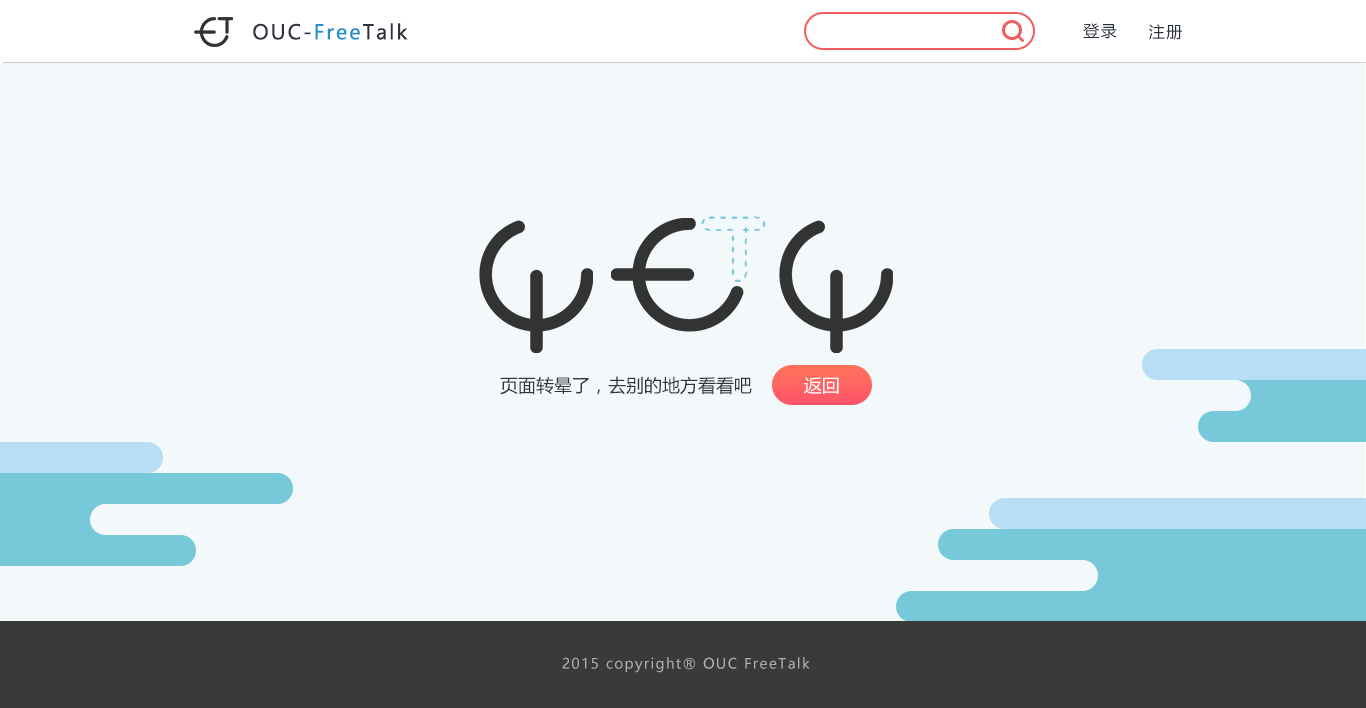
<style>
.page{position:relative;width:1366px;height:708px;background:#f3f8fb}
.page>*{position:absolute;margin:0}
.t1{font:20px "MicrosoftYaHei";letter-spacing:0.1em;color:#2b313f}
.t2{font:20px "MicrosoftYaHei";letter-spacing:0.1em;color:#2390cf}
.t3{font:16px "MicrosoftYaHei";letter-spacing:0.1em;color:#2b313f}
.t4{font:18px "MicrosoftYaHei";color:#333333}
.t5{font:18px "MicrosoftYaHei";color:#ffffff}
.t6{font:14px "MicrosoftYaHei";letter-spacing:0.1em;color:#afafb0}
</style>
<div class="page">
<p class="t1" style="left:253px;top:23px;width:155px;height:17px">OUC-<span class="t2">Free</span>Talk</p>
<p class="t3" style="left:1083px;top:23px;width:34px;height:16px">登录</p>
<p class="t3" style="left:1149px;top:24px;width:33px;height:16px">注册</p>
<p class="t4" style="left:500px;top:376px;width:252px;height:19px">页面转晕了，去别的地方看看吧</p>
<p class="t5" style="left:804px;top:377px;width:35px;height:17px">返回</p>
<p class="t6" style="left:562px;top:657px;width:248px;height:16px">2015 copyright® OUC FreeTalk</p>
</div>
